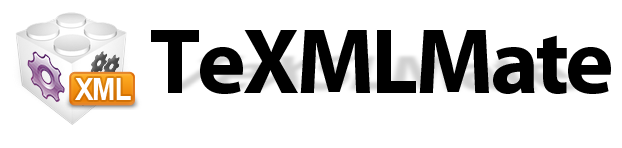
<style>
.page{position:relative;width:622px;height:148px;background:#ffffff}
.page>*{position:absolute;margin:0}
.t1{font:92.9px "Myriad-Bold";letter-spacing:-0.04em;color:#000000}
.t2{font:30.8px "Arial-BoldMT";letter-spacing:-0.04em;color:#ffffff;scale:0.9 1}
</style>
<div class="page">
<p class="t1" style="left:151px;top:30px;width:460px;height:64px">TeXMLMate</p>
<p class="t2" style="left:75px;top:78px;width:56px;height:22px">XML</p>
</div>
